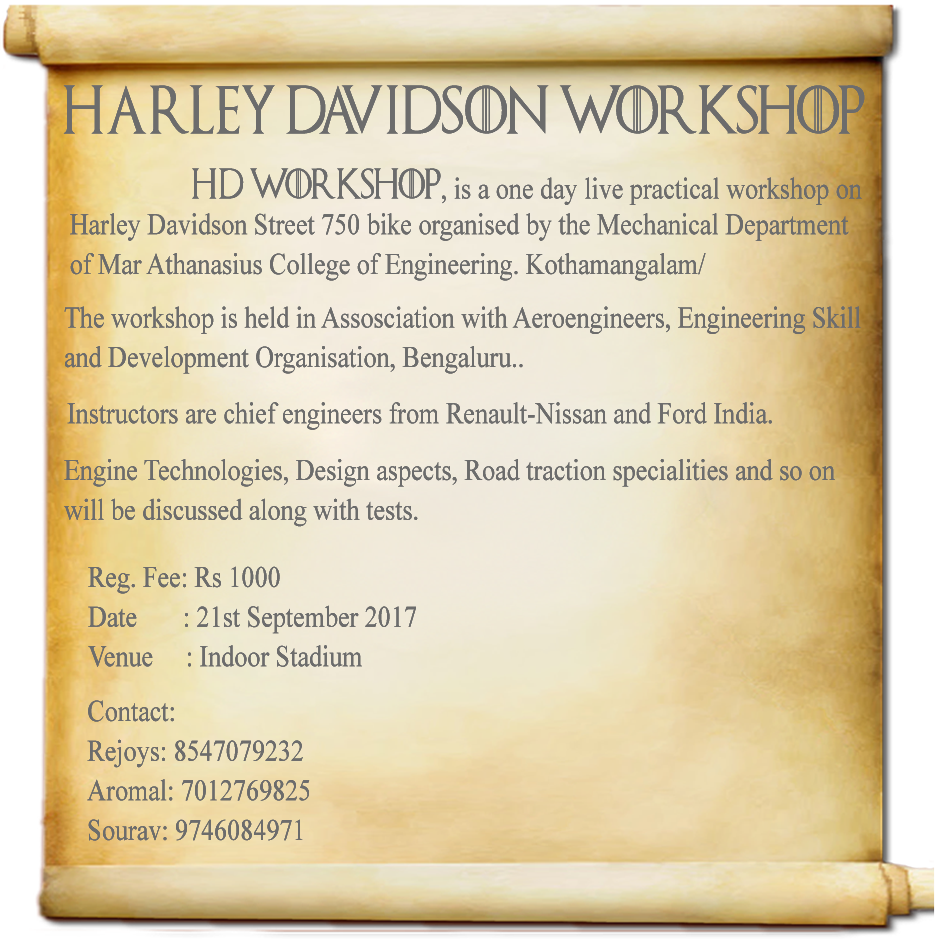
<style>
.page{position:relative;width:944px;height:939px}
.page>*{position:absolute;margin:0}
.t1{font:48px "GameofThrones";color:#6c6c6c;scale:0.87 1}
.t2{font:30px "TimesNewRomanPSMT";color:#6c6c6c;scale:0.87 1}
.t3{font:30px "GameofThrones";color:#6c6c6c;scale:0.87 1}
.t4{font:30px/39.6px "TimesNewRomanPSMT";color:#6c6c6c;scale:0.87 1}
</style>
<div class="page">
<p class="t1" style="left:63px;top:85px;width:802px;height:49px">hArley davidson workshop</p>
<p class="t1" style="left:63px;top:85px;width:802px;height:49px">hArley davidson workshop</p>
<p class="t1" style="left:63px;top:85px;width:802px;height:49px">hArley davidson workshop</p>
<p class="t2" style="left:192px;top:168px;width:670px;height:37px"><span class="t3">Hd workshop</span>, is a one day live practical workshop on</p>
<p class="t2" style="left:192px;top:168px;width:670px;height:37px"><span class="t3">Hd workshop</span>, is a one day live practical workshop on</p>
<p class="t2" style="left:192px;top:168px;width:670px;height:37px"><span class="t3">Hd workshop</span>, is a one day live practical workshop on</p>
<p class="t4" style="left:70px;top:213px;width:779px;height:68px">Harley Davidson Street 750 bike organised by the Mechanical Department<br>of Mar Athanasius College of Engineering. Kothamangalam/</p>
<p class="t4" style="left:70px;top:213px;width:779px;height:68px">Harley Davidson Street 750 bike organised by the Mechanical Department<br>of Mar Athanasius College of Engineering. Kothamangalam/</p>
<p class="t4" style="left:70px;top:213px;width:779px;height:68px">Harley Davidson Street 750 bike organised by the Mechanical Department<br>of Mar Athanasius College of Engineering. Kothamangalam/</p>
<p class="t4" style="left:64px;top:306px;width:797px;height:68px">The workshop is held in Assosciation with Aeroengineers, Engineering Skill<br>and Development Organisation, Bengaluru..</p>
<p class="t4" style="left:64px;top:306px;width:797px;height:68px">The workshop is held in Assosciation with Aeroengineers, Engineering Skill<br>and Development Organisation, Bengaluru..</p>
<p class="t4" style="left:64px;top:306px;width:797px;height:68px">The workshop is held in Assosciation with Aeroengineers, Engineering Skill<br>and Development Organisation, Bengaluru..</p>
<p class="t2" style="left:67px;top:402px;width:705px;height:28px">Instructors are chief engineers from Renault-Nissan and Ford India.</p>
<p class="t2" style="left:67px;top:402px;width:705px;height:28px">Instructors are chief engineers from Renault-Nissan and Ford India.</p>
<p class="t2" style="left:67px;top:402px;width:705px;height:28px">Instructors are chief engineers from Renault-Nissan and Ford India.</p>
<p class="t4" style="left:64px;top:459px;width:771px;height:68px">Engine Technologies, Design aspects, Road traction specialities and so on<br>will be discussed along with tests.</p>
<p class="t4" style="left:64px;top:459px;width:771px;height:68px">Engine Technologies, Design aspects, Road traction specialities and so on<br>will be discussed along with tests.</p>
<p class="t4" style="left:64px;top:459px;width:771px;height:68px">Engine Technologies, Design aspects, Road traction specialities and so on<br>will be discussed along with tests.</p>
<p class="t4" style="left:88px;top:566px;width:328px;height:101px">Reg. Fee: Rs 1000<br>Date       : 21st September 2017<br>Venue     : Indoor Stadium</p>
<p class="t4" style="left:88px;top:566px;width:328px;height:101px">Reg. Fee: Rs 1000<br>Date       : 21st September 2017<br>Venue     : Indoor Stadium</p>
<p class="t4" style="left:88px;top:566px;width:328px;height:101px">Reg. Fee: Rs 1000<br>Date       : 21st September 2017<br>Venue     : Indoor Stadium</p>
<p class="t4" style="left:87px;top:700px;width:223px;height:141px">Contact:<br>Rejoys: 8547079232<br>Aromal: 7012769825<br>Sourav: 9746084971</p>
<p class="t4" style="left:87px;top:700px;width:223px;height:141px">Contact:<br>Rejoys: 8547079232<br>Aromal: 7012769825<br>Sourav: 9746084971</p>
<p class="t4" style="left:87px;top:700px;width:223px;height:141px">Contact:<br>Rejoys: 8547079232<br>Aromal: 7012769825<br>Sourav: 9746084971</p>
</div>
